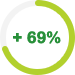
<style>
.page{position:relative;width:75px;height:75px;background:#ffffff}
.page>*{position:absolute;margin:0}
.t1{font:16px "ArialRoundedMTBold";color:#28903a;font-weight:bold}
</style>
<div class="page">
<p class="t1" style="left:13px;top:31px;width:48px;height:13px">+ 69%</p>
</div>
